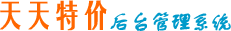
<style>
.page{position:relative;width:231px;height:31px;background:#ffffff}
.page>*{position:absolute;margin:0}
.t1{font:30px "FZYTK--GBK1-0";letter-spacing:-0.075em;color:#ff6600;font-weight:bold}
.t2{font:22px "FZSTK--GBK1-0";letter-spacing:-0.1em;color:#009aca;font-weight:bold}
</style>
<div class="page">
<p class="t1" style="left:0px;top:0px;width:107px;height:31px">天天特价</p>
<p class="t2" style="left:110px;top:12px;width:121px;height:19px">后台管理系统</p>
</div>
